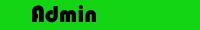
<style>
.page{position:relative;width:200px;height:30px;background:#13d513}
.page>*{position:absolute;margin:0}
.t1{font:24px "Bauhaus93";color:#000000}
</style>
<div class="page">
<p class="t1" style="left:32px;top:5px;width:64px;height:18px">Admin</p>
</div>
